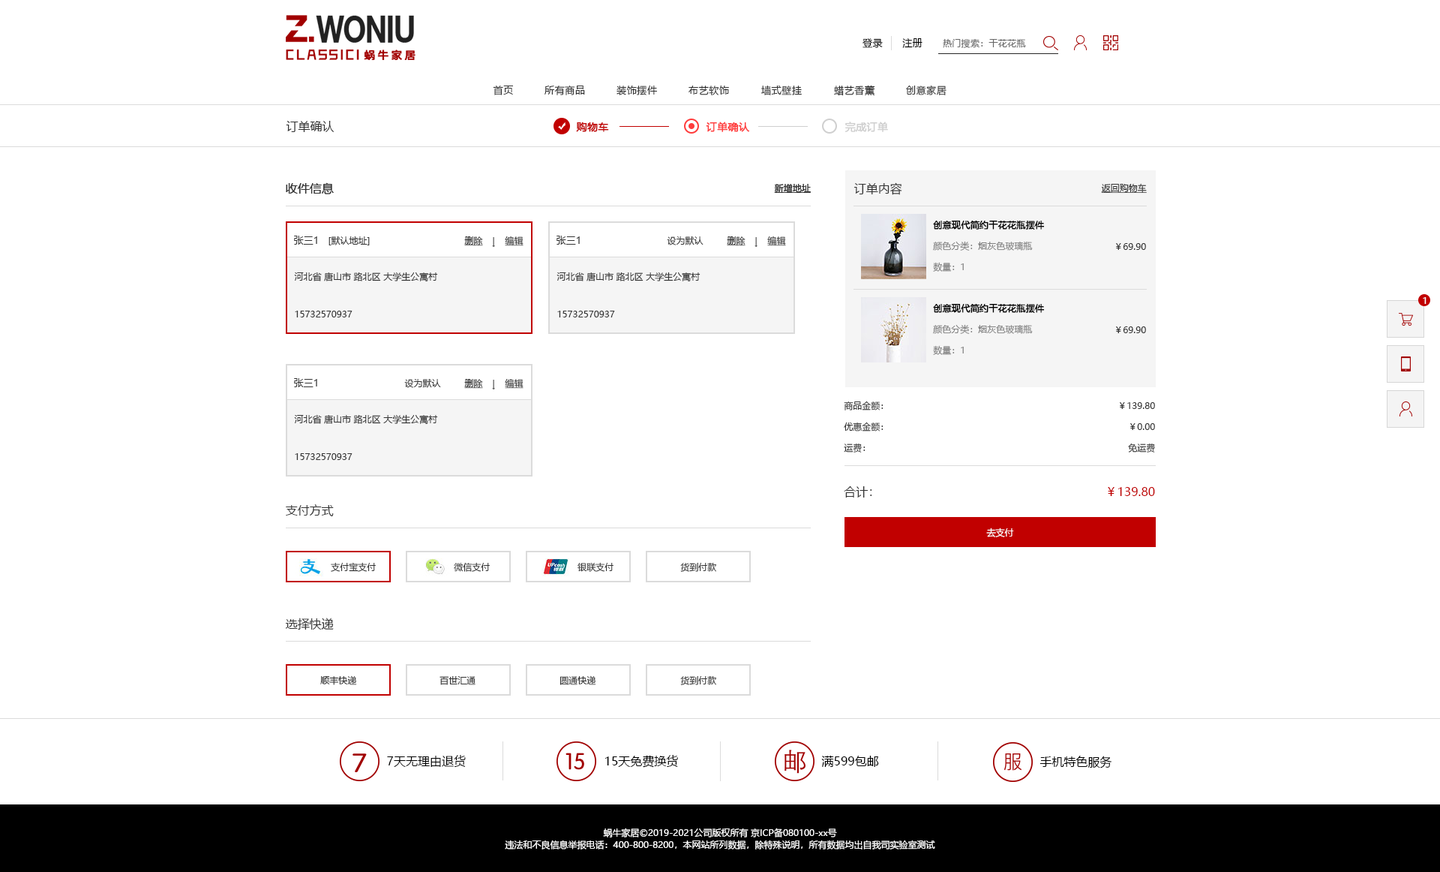
<style>
.page{position:relative;width:1440px;height:872px;background:#ffffff}
.page>*{position:absolute;margin:0}
.t1{font:9.8px "MicrosoftYaHei";letter-spacing:0.05em;color:#000000}
.t2{font:9px "MicrosoftYaHei";letter-spacing:0.025em;color:#686868}
.t3{font:9.8px "MicrosoftYaHei";letter-spacing:0.05em;color:#333333}
.t4{font:12px "MicrosoftYaHei";color:#333333}
.t5{font:10.5px "MicrosoftYaHei";color:#c10000;font-weight:bold}
.t6{font:10.5px "MicrosoftYaHei";color:#ff3c3c;font-weight:bold}
.t7{font:10.5px "MicrosoftYaHei";color:#cfcfcf;font-weight:bold}
.t8{font:9px "MicrosoftYaHei";color:#333333;text-decoration:underline}
.t9{font:9px "MicrosoftYaHei";color:#000000;font-weight:bold}
.t10{font:9.8px "MicrosoftYaHei";color:#333333}
.t11{font:9px "MicrosoftYaHei";color:#333333}
.t12{font:9px "MicrosoftYaHei";text-decoration:underline}
.t13{font:9px "MicrosoftYaHei";color:#808080}
.t14{font:9px "MicrosoftYaHei";letter-spacing:0.025em;color:#ffffff}
.t15{font:12px "MicrosoftYaHei";color:#c10000}
.t16{font:9px "MicrosoftYaHei";color:#ffffff}
.t17{font:12px "MicrosoftYaHei";color:#000000}
.t18{font:9px/12px "MicrosoftYaHei";color:#ffffff}
</style>
<div class="page">
<p class="t1" style="left:862px;top:38px;width:21px;height:10px">登录</p>
<p class="t1" style="left:902px;top:38px;width:20px;height:10px">注册</p>
<p class="t2" style="left:943px;top:38px;width:83px;height:10px">热门搜索：干花花瓶</p>
<p class="t3" style="left:493px;top:86px;width:20px;height:9px">首页</p>
<p class="t3" style="left:544px;top:86px;width:41px;height:9px">所有商品</p>
<p class="t3" style="left:616px;top:86px;width:41px;height:9px">装饰摆件</p>
<p class="t3" style="left:688px;top:86px;width:41px;height:9px">布艺软饰</p>
<p class="t3" style="left:760px;top:86px;width:42px;height:9px">墙式壁挂</p>
<p class="t3" style="left:834px;top:85px;width:41px;height:11px">蜡艺香薰</p>
<p class="t3" style="left:906px;top:86px;width:40px;height:9px">创意家居</p>
<p class="t4" style="left:286px;top:121px;width:48px;height:11px">订单确认</p>
<p class="t5" style="left:576px;top:122px;width:33px;height:10px">购物车</p>
<p class="t6" style="left:706px;top:122px;width:44px;height:10px">订单确认</p>
<p class="t7" style="left:844px;top:122px;width:44px;height:10px">完成订单</p>
<p class="t4" style="left:286px;top:182px;width:48px;height:12px">收件信息</p>
<p class="t4" style="left:286px;top:182px;width:48px;height:12px">收件信息</p>
<p class="t8" style="left:774px;top:184px;width:37px;height:9px">新增地址</p>
<p class="t8" style="left:774px;top:184px;width:37px;height:9px">新增地址</p>
<p class="t4" style="left:854px;top:182px;width:48px;height:13px">订单内容</p>
<p class="t8" style="left:1101px;top:183px;width:46px;height:10px">返回购物车</p>
<p class="t9" style="left:933px;top:220px;width:112px;height:10px">创意现代简约干花花瓶摆件</p>
<p class="t10" style="left:294px;top:236px;width:23px;height:8px">张三1</p>
<p class="t11" style="left:328px;top:236px;width:42px;height:9px">[默认地址]</p>
<p class="t8" style="left:464px;top:236px;width:19px;height:10px">删除</p>
<p class="t12" style="left:492px;top:237px;width:3px;height:10px">|</p>
<p class="t8" style="left:505px;top:236px;width:19px;height:10px">编辑</p>
<p class="t10" style="left:556px;top:236px;width:24px;height:8px">张三1</p>
<p class="t11" style="left:667px;top:236px;width:37px;height:9px">设为默认</p>
<p class="t8" style="left:727px;top:236px;width:19px;height:10px">删除</p>
<p class="t12" style="left:754px;top:237px;width:4px;height:10px">|</p>
<p class="t8" style="left:767px;top:236px;width:19px;height:10px">编辑</p>
<p class="t13" style="left:933px;top:241px;width:100px;height:9px">颜色分类：烟灰色玻璃瓶</p>
<p class="t11" style="left:1116px;top:243px;width:30px;height:7px">￥69.90</p>
<p class="t13" style="left:933px;top:262px;width:31px;height:10px">数量：1</p>
<p class="t11" style="left:294px;top:272px;width:144px;height:9px">河北省 唐山市 路北区 大学生公寓村</p>
<p class="t11" style="left:556px;top:272px;width:144px;height:9px">河北省 唐山市 路北区 大学生公寓村</p>
<p class="t9" style="left:933px;top:303px;width:112px;height:10px">创意现代简约干花花瓶摆件</p>
<p class="t14" style="left:1423px;top:297px;width:3px;height:7px">1</p>
<p class="t11" style="left:295px;top:310px;width:57px;height:7px">15732570937</p>
<p class="t11" style="left:557px;top:310px;width:58px;height:7px">15732570937</p>
<p class="t13" style="left:933px;top:324px;width:100px;height:10px">颜色分类：烟灰色玻璃瓶</p>
<p class="t11" style="left:1116px;top:326px;width:30px;height:7px">￥69.90</p>
<p class="t13" style="left:933px;top:345px;width:31px;height:10px">数量：1</p>
<p class="t10" style="left:294px;top:378px;width:23px;height:9px">张三1</p>
<p class="t11" style="left:404px;top:378px;width:37px;height:10px">设为默认</p>
<p class="t8" style="left:464px;top:379px;width:19px;height:9px">删除</p>
<p class="t12" style="left:492px;top:380px;width:3px;height:9px">|</p>
<p class="t8" style="left:505px;top:378px;width:19px;height:10px">编辑</p>
<p class="t11" style="left:844px;top:400px;width:40px;height:10px">商品金额：</p>
<p class="t11" style="left:294px;top:414px;width:144px;height:10px">河北省 唐山市 路北区 大学生公寓村</p>
<p class="t11" style="left:1120px;top:402px;width:35px;height:7px">￥139.80</p>
<p class="t11" style="left:844px;top:422px;width:40px;height:9px">优惠金额：</p>
<p class="t11" style="left:1130px;top:423px;width:25px;height:7px">￥0.00</p>
<p class="t11" style="left:844px;top:442px;width:22px;height:10px">运费：</p>
<p class="t11" style="left:1128px;top:442px;width:27px;height:10px">免运费</p>
<p class="t11" style="left:295px;top:453px;width:57px;height:7px">15732570937</p>
<p class="t4" style="left:844px;top:486px;width:28px;height:11px">合计：</p>
<p class="t15" style="left:1108px;top:487px;width:47px;height:9px">￥139.80</p>
<p class="t4" style="left:286px;top:504px;width:48px;height:12px">支付方式</p>
<p class="t16" style="left:986px;top:527px;width:28px;height:10px">去支付</p>
<p class="t11" style="left:331px;top:562px;width:45px;height:10px">支付宝支付</p>
<p class="t11" style="left:454px;top:562px;width:36px;height:10px">微信支付</p>
<p class="t11" style="left:578px;top:562px;width:36px;height:10px">银联支付</p>
<p class="t11" style="left:680px;top:562px;width:36px;height:10px">货到付款</p>
<p class="t4" style="left:286px;top:617px;width:48px;height:13px">选择快递</p>
<p class="t11" style="left:320px;top:675px;width:37px;height:10px">顺丰快递</p>
<p class="t11" style="left:440px;top:676px;width:36px;height:9px">百世汇通</p>
<p class="t11" style="left:560px;top:675px;width:36px;height:10px">圆通快递</p>
<p class="t11" style="left:680px;top:675px;width:36px;height:10px">货到付款</p>
<p class="t17" style="left:387px;top:754px;width:79px;height:12px">7天无理由退货</p>
<p class="t17" style="left:605px;top:754px;width:73px;height:13px">15天免费换货</p>
<p class="t17" style="left:821px;top:755px;width:58px;height:11px">满599包邮</p>
<p class="t17" style="left:1040px;top:755px;width:72px;height:13px">手机特色服务</p>
<p class="t18" style="left:505px;top:827px;width:430px;height:22px;text-align:center">蜗牛家居©2019-2021公司版权所有 京ICP备080100-xx号<br>违法和不良信息举报电话：400-800-8200，本网站所列数据，除特殊说明，所有数据均出自我司实验室测试</p>
</div>
